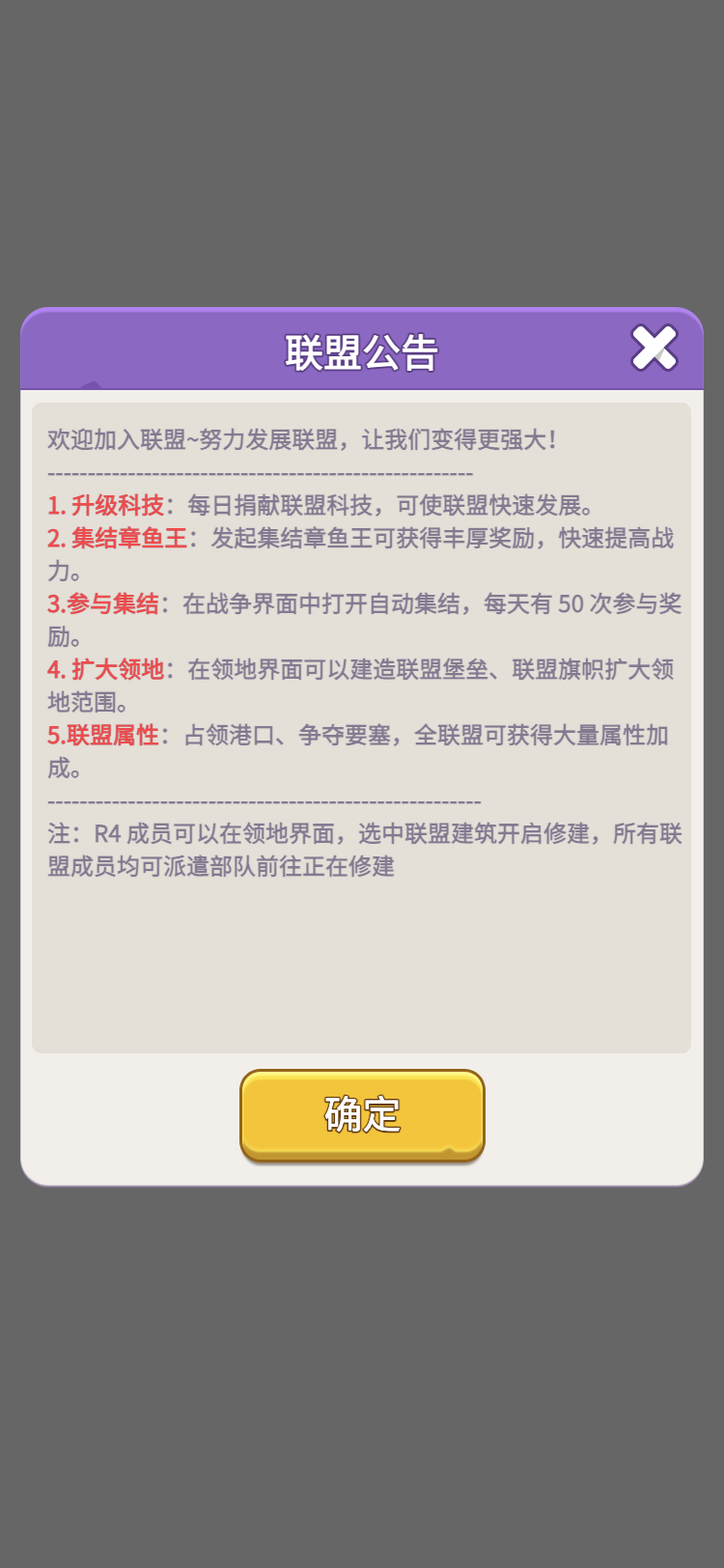
<style>
.page{position:relative;width:724px;height:1568px;background:#666666}
.page>*{position:absolute;margin:0}
.t1{font:38.6px "WebPSD-18463539-0-Regular";color:#ffffff;font-weight:bold}
.t2{font:23.2px "WebPSD-18463539-0-Regular";color:#837a91;font-weight:bold}
.t3{font:23.2px "WebPSD-18463539-0-Regular";color:#ef4b4b;font-weight:bold}
.t4{font:23.2px/32.8px "WebPSD-18463539-0-Regular";color:#837a91;font-weight:bold}
.t5{font:38.6px/38.6px "WebPSD-18463539-0-Regular";color:#ffffff}
</style>
<div class="page">
<p class="t1" style="left:107px;top:324px;width:510px;height:56px">联盟公告</p>
<p class="t2" style="left:47px;top:428px;width:638px;height:33px">欢迎加入联盟~努力发展联盟，让我们变得更强大！</p>
<p class="t2" style="left:47px;top:461px;width:638px;height:32px">-----------------------------------------------------</p>
<p class="t2" style="left:47px;top:493px;width:638px;height:33px">1. 升级科技：每日捐献联盟科技，可使联盟快速发展。</p>
<p class="t3" style="left:47px;top:493px;width:174px;height:33px">1. 升级科技</p>
<p class="t4" style="left:47px;top:526px;width:638px;height:66px">2. 集结章鱼王：发起集结章鱼王可获得丰厚奖励，快速提高战<br>力。</p>
<p class="t3" style="left:47px;top:526px;width:193px;height:33px">2. 集结章鱼王</p>
<p class="t4" style="left:47px;top:592px;width:638px;height:66px">3.参与集结：在战争界面中打开自动集结，每天有 50 次参与奖<br>励。</p>
<p class="t3" style="left:47px;top:592px;width:174px;height:33px">3.参与集结</p>
<p class="t4" style="left:47px;top:658px;width:638px;height:65px">4. 扩大领地：在领地界面可以建造联盟堡垒、联盟旗帜扩大领<br>地范围。</p>
<p class="t3" style="left:47px;top:658px;width:174px;height:32px">4. 扩大领地</p>
<p class="t4" style="left:47px;top:723px;width:638px;height:66px">5.联盟属性：占领港口、争夺要塞，全联盟可获得大量属性加<br>成。</p>
<p class="t3" style="left:47px;top:723px;width:174px;height:33px">5.联盟属性</p>
<p class="t2" style="left:47px;top:789px;width:638px;height:33px">------------------------------------------------------</p>
<p class="t4" style="left:47px;top:822px;width:638px;height:65px">注：R4 成员可以在领地界面，选中联盟建筑开启修建，所有联<br>盟成员均可派遣部队前往正在修建</p>
<p class="t5" style="left:247px;top:1073px;width:231px;height:83px;text-align:center">确定</p>
</div>
